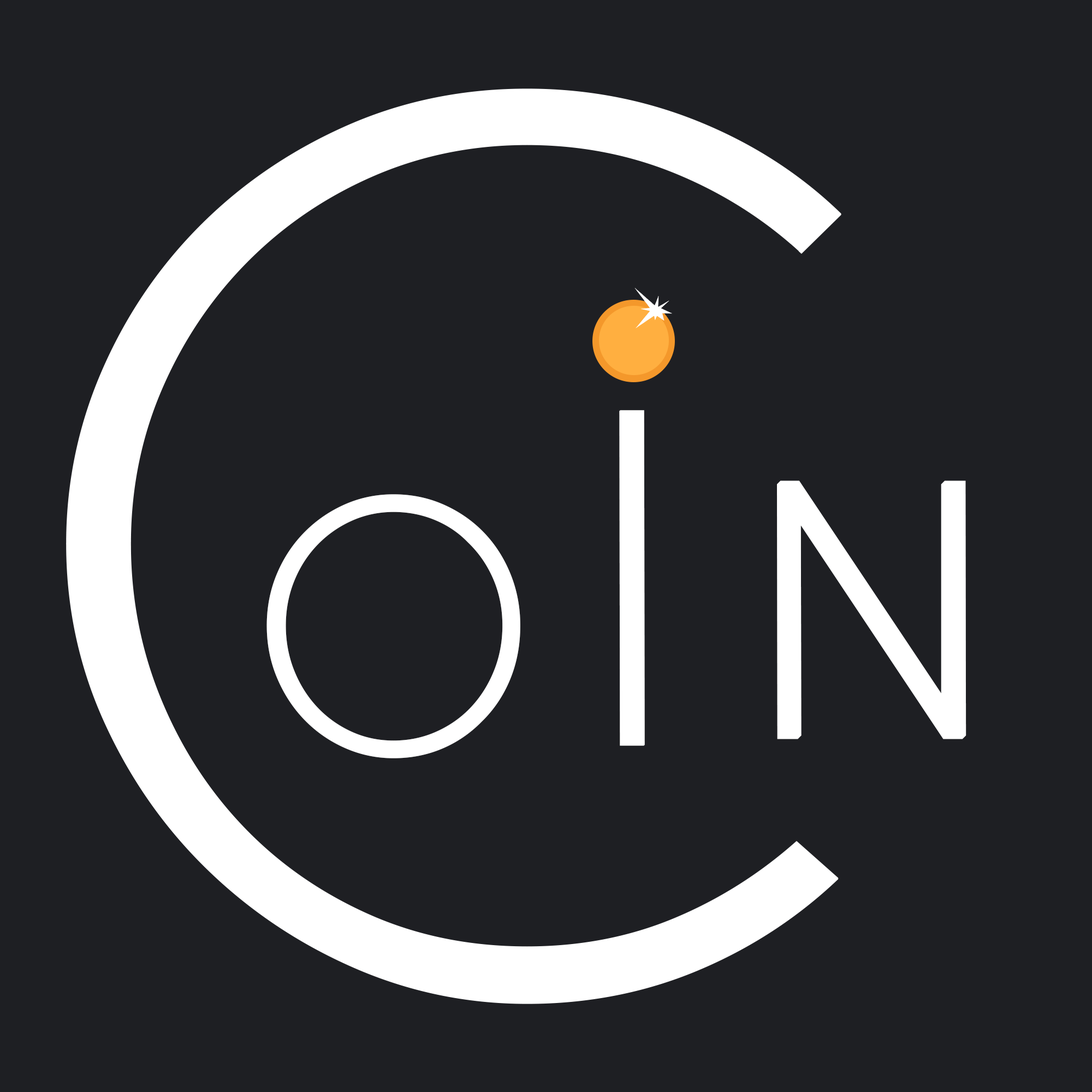
<style>
.page{position:relative;width:1092px;height:1092px;background:#1e1f23}
.page>*{position:absolute;margin:0}
.t1{font:482.6px "CicleFina";letter-spacing:-0.06em;color:#ffffff;text-transform:uppercase;font-weight:bold;scale:1.13 1}
.t2{font:363.5px "CicleFina";letter-spacing:-0.06em;color:#ffffff;text-transform:uppercase;font-weight:bold;scale:1.13 1}
.t3{font:372.4px "CicleFina";letter-spacing:-0.06em;color:#ffffff;text-transform:uppercase;font-weight:bold;scale:1.08 1}
</style>
<div class="page">
<p class="t1" style="left:619px;top:410px;width:26px;height:336px">i</p>
<p class="t2" style="left:777px;top:480px;width:189px;height:259px">n</p>
<p class="t3" style="left:266px;top:494px;width:254px;height:264px">o</p>
</div>
